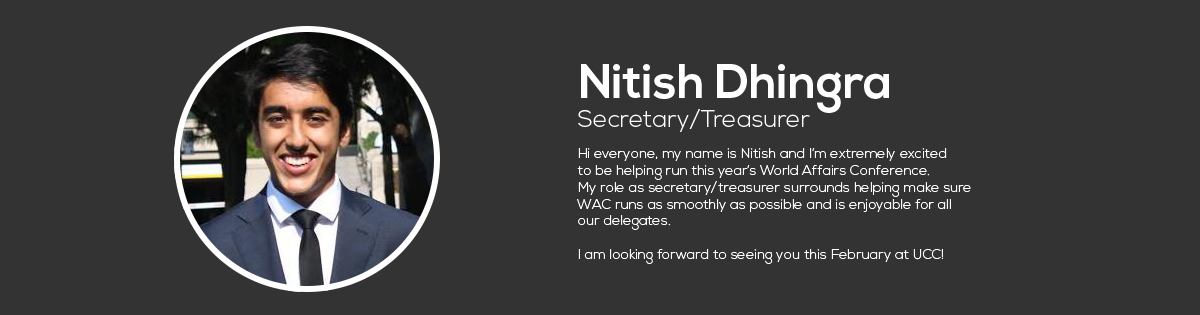
<style>
.page{position:relative;width:1200px;height:315px;background:#333333}
.page>*{position:absolute;margin:0}
.t1{font:14px "NexaLight";color:#ffffff}
.t2{font:48px "NexaBold";color:#ffffff}
.t3{font:24px "NexaLight";color:#ffffff}
</style>
<div class="page">
<p class="t1" style="left:577px;top:64px;width:394px;height:200px"><span class="t2">Nitish Dhingra<br></span><span class="t3">Secretary/Treasurer<br><br></span>Hi everyone, my name is Nitish and I’m extremely excited <br>to be helping run this year’s World Affairs Conference.<br>My role as secretary/treasurer surrounds helping make sure <br>WAC runs as smoothly as possible and is enjoyable for all <br>our delegates. <br><br>I am looking forward to seeing you this February at UCC!</p>
</div>
